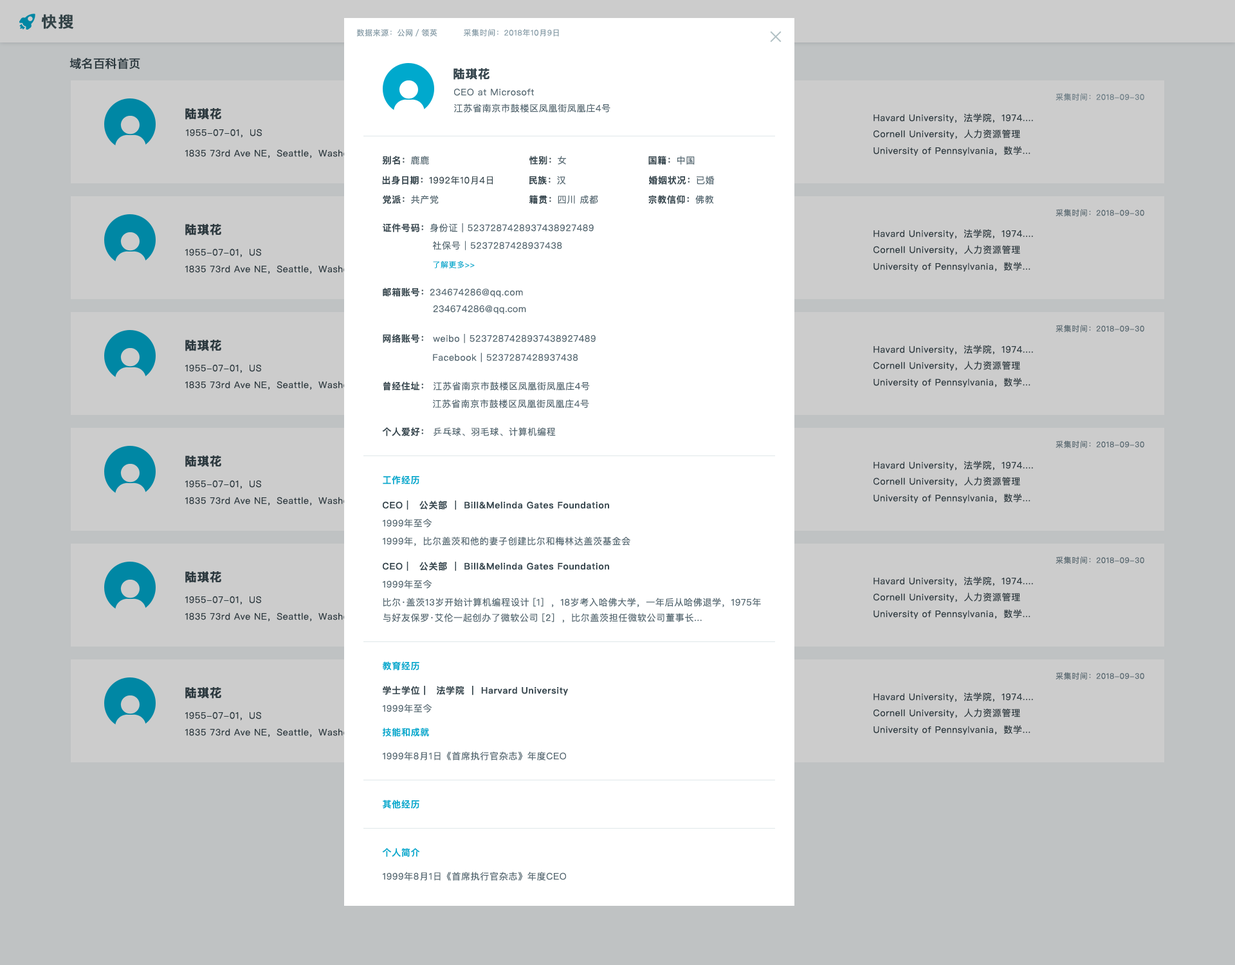
<style>
.page{position:relative;width:1235px;height:965px;background:#cccccc}
.page>*{position:absolute;margin:0}
.t1{font:15.4px "PingFangSC-Semibold";letter-spacing:0.05em;color:#405459;font-weight:bold}
.t2{font:7.7px "PingFangSC-Regular";letter-spacing:0.05em;color:#859ba6}
.t3{font:11.6px "PingFangSC-Regular";color:#37474f;font-weight:bold}
.t4{font:11.6px "PingFangSC-Semibold";letter-spacing:0.05em;color:#37474f;font-weight:bold}
.t5{font:9px "PingFangSC-Regular";letter-spacing:0.05em;color:#536670}
.t6{font:7.7px "PingFangSC-Regular";letter-spacing:0.05em;color:#6a7c85}
.t7{font:9px "PingFangSC-Regular";letter-spacing:0.05em;color:#37474f}
.t8{font:9px "PingFangSC-Semibold";letter-spacing:0.05em;color:#37474f}
.t9{font:7.7px "PingFangSC-Regular";letter-spacing:0.05em;color:#55666e}
.t10{font:7.7px "PingFangSC-Regular";letter-spacing:0.05em;color:#00a9cd}
.t11{font:9px "PingFangSC-Semibold";letter-spacing:0.05em;color:#00a9cd}
.t12{font:9px/15.4px "PingFangSC-Regular";letter-spacing:0.05em;color:#536670}
</style>
<div class="page">
<p class="t1" style="left:41px;top:14px;width:32px;height:15px">快搜</p>
<p class="t2" style="left:356px;top:29px;width:82px;height:8px">数据来源：公网／领英</p>
<p class="t2" style="left:464px;top:29px;width:95px;height:8px">采集时间：2018年10月9日</p>
<p class="t3" style="left:69px;top:58px;width:71px;height:11px">域名百科首页</p>
<p class="t4" style="left:454px;top:68px;width:36px;height:12px">陆琪花</p>
<p class="t5" style="left:454px;top:88px;width:80px;height:8px">CEO at Microsoft</p>
<p class="t6" style="left:1056px;top:93px;width:89px;height:8px">采集时间：2018-09-30</p>
<p class="t4" style="left:185px;top:108px;width:36px;height:12px">陆琪花</p>
<p class="t5" style="left:454px;top:104px;width:157px;height:9px">江苏省南京市鼓楼区凤凰街凤凰庄4号</p>
<p class="t7" style="left:874px;top:113px;width:159px;height:10px">Havard University，法学院，1974....</p>
<p class="t7" style="left:186px;top:129px;width:77px;height:9px">1955-07-01，US</p>
<p class="t7" style="left:874px;top:129px;width:147px;height:10px">Cornell University，人力资源管理</p>
<p class="t7" style="left:185px;top:149px;width:184px;height:9px">1835 73rd Ave NE，Seattle，Washonton</p>
<p class="t7" style="left:874px;top:146px;width:157px;height:10px">University of Pennsylvania，数学...</p>
<p class="t8" style="left:382px;top:156px;width:47px;height:9px">别名：<span class="t5">鹿鹿</span></p>
<p class="t8" style="left:529px;top:156px;width:37px;height:9px">性别：<span class="t5">女</span></p>
<p class="t8" style="left:649px;top:156px;width:46px;height:9px">国籍：<span class="t5">中国</span></p>
<p class="t7" style="left:382px;top:176px;width:111px;height:9px"><span class="t8">出身日期：</span>1992年10月4日</p>
<p class="t8" style="left:529px;top:176px;width:37px;height:9px">民族：<span class="t5">汉</span></p>
<p class="t8" style="left:649px;top:176px;width:66px;height:9px">婚姻状况：<span class="t5">已婚</span></p>
<p class="t8" style="left:383px;top:195px;width:56px;height:9px">党派：<span class="t5">共产党</span></p>
<p class="t5" style="left:529px;top:195px;width:69px;height:9px"><span class="t8">籍贯：</span>四川 成都</p>
<p class="t8" style="left:649px;top:195px;width:65px;height:9px">宗教信仰：<span class="t5">佛教</span></p>
<p class="t9" style="left:1056px;top:209px;width:89px;height:8px">采集时间：2018-09-30</p>
<p class="t4" style="left:185px;top:224px;width:36px;height:12px">陆琪花</p>
<p class="t5" style="left:383px;top:223px;width:211px;height:10px"><span class="t8">证件号码：</span>身份证｜5237287428937438927489</p>
<p class="t7" style="left:874px;top:229px;width:159px;height:10px">Havard University，法学院，1974....</p>
<p class="t5" style="left:432px;top:241px;width:130px;height:9px">社保号｜5237287428937438</p>
<p class="t7" style="left:874px;top:245px;width:147px;height:10px">Cornell University，人力资源管理</p>
<p class="t7" style="left:185px;top:248px;width:77px;height:9px">1955-07-01，US</p>
<p class="t7" style="left:185px;top:265px;width:184px;height:9px">1835 73rd Ave NE，Seattle，Washonton</p>
<p class="t10" style="left:433px;top:261px;width:42px;height:7px">了解更多&gt;&gt;</p>
<p class="t7" style="left:874px;top:262px;width:157px;height:10px">University of Pennsylvania，数学...</p>
<p class="t5" style="left:383px;top:288px;width:140px;height:9px"><span class="t8">邮箱账号：</span>234674286@qq.com</p>
<p class="t5" style="left:433px;top:305px;width:93px;height:9px">234674286@qq.com</p>
<p class="t9" style="left:1056px;top:325px;width:89px;height:8px">采集时间：2018-09-30</p>
<p class="t4" style="left:185px;top:340px;width:36px;height:11px">陆琪花</p>
<p class="t5" style="left:383px;top:334px;width:213px;height:10px"><span class="t8">网络账号： </span>weibo｜5237287428937438927489</p>
<p class="t5" style="left:433px;top:353px;width:145px;height:9px">Facebook｜5237287428937438</p>
<p class="t7" style="left:874px;top:345px;width:159px;height:10px">Havard University，法学院，1974....</p>
<p class="t7" style="left:185px;top:364px;width:77px;height:9px">1955-07-01，US</p>
<p class="t7" style="left:874px;top:361px;width:147px;height:10px">Cornell University，人力资源管理</p>
<p class="t7" style="left:874px;top:378px;width:157px;height:9px">University of Pennsylvania，数学...</p>
<p class="t7" style="left:185px;top:381px;width:184px;height:9px">1835 73rd Ave NE，Seattle，Washonton</p>
<p class="t5" style="left:384px;top:382px;width:206px;height:9px"><span class="t8">曾经住址： </span>江苏省南京市鼓楼区凤凰街凤凰庄4号</p>
<p class="t5" style="left:433px;top:400px;width:156px;height:9px">江苏省南京市鼓楼区凤凰街凤凰庄4号</p>
<p class="t5" style="left:382px;top:427px;width:174px;height:9px"><span class="t8">个人爱好： </span>乒乓球、羽毛球、计算机编程</p>
<p class="t9" style="left:1056px;top:441px;width:89px;height:7px">采集时间：2018-09-30</p>
<p class="t4" style="left:185px;top:456px;width:36px;height:11px">陆琪花</p>
<p class="t7" style="left:874px;top:461px;width:159px;height:9px">Havard University，法学院，1974....</p>
<p class="t7" style="left:185px;top:480px;width:77px;height:9px">1955-07-01，US</p>
<p class="t11" style="left:383px;top:476px;width:37px;height:9px">工作经历</p>
<p class="t7" style="left:874px;top:477px;width:147px;height:9px">Cornell University，人力资源管理</p>
<p class="t7" style="left:185px;top:497px;width:184px;height:9px">1835 73rd Ave NE，Seattle，Washonton</p>
<p class="t7" style="left:874px;top:494px;width:157px;height:9px">University of Pennsylvania，数学...</p>
<p class="t8" style="left:383px;top:501px;width:226px;height:9px">CEO |   公关部 ｜ Bill&amp;Melinda Gates Foundation</p>
<p class="t5" style="left:383px;top:519px;width:49px;height:9px">1999年至今</p>
<p class="t5" style="left:383px;top:537px;width:248px;height:9px">1999年，比尔盖茨和他的妻子创建比尔和梅林达盖茨基金会</p>
<p class="t9" style="left:1056px;top:557px;width:89px;height:7px">采集时间：2018-09-30</p>
<p class="t8" style="left:383px;top:562px;width:226px;height:9px">CEO |   公关部 ｜ Bill&amp;Melinda Gates Foundation</p>
<p class="t4" style="left:185px;top:571px;width:36px;height:12px">陆琪花</p>
<p class="t5" style="left:383px;top:580px;width:49px;height:9px">1999年至今</p>
<p class="t7" style="left:874px;top:577px;width:159px;height:9px">Havard University，法学院，1974....</p>
<p class="t7" style="left:874px;top:593px;width:147px;height:9px">Cornell University，人力资源管理</p>
<p class="t7" style="left:185px;top:596px;width:77px;height:9px">1955-07-01，US</p>
<p class="t12" style="left:383px;top:598px;width:378px;height:25px">比尔·盖茨13岁开始计算机编程设计 [1]  ，18岁考入哈佛大学，一年后从哈佛退学，1975年<br>与好友保罗·艾伦一起创办了微软公司 [2]  ，比尔盖茨担任微软公司董事长...</p>
<p class="t7" style="left:185px;top:613px;width:184px;height:9px">1835 73rd Ave NE，Seattle，Washonton</p>
<p class="t7" style="left:874px;top:609px;width:157px;height:10px">University of Pennsylvania，数学...</p>
<p class="t11" style="left:382px;top:661px;width:38px;height:9px">教育经历</p>
<p class="t9" style="left:1056px;top:672px;width:89px;height:8px">采集时间：2018-09-30</p>
<p class="t4" style="left:185px;top:687px;width:36px;height:12px">陆琪花</p>
<p class="t8" style="left:383px;top:686px;width:185px;height:10px">学士学位 |   法学院 ｜ Harvard University</p>
<p class="t7" style="left:874px;top:692px;width:159px;height:10px">Havard University，法学院，1974....</p>
<p class="t7" style="left:185px;top:712px;width:77px;height:9px">1955-07-01，US</p>
<p class="t5" style="left:383px;top:704px;width:49px;height:9px">1999年至今</p>
<p class="t7" style="left:874px;top:708px;width:147px;height:10px">Cornell University，人力资源管理</p>
<p class="t7" style="left:874px;top:725px;width:157px;height:10px">University of Pennsylvania，数学...</p>
<p class="t7" style="left:185px;top:728px;width:184px;height:9px">1835 73rd Ave NE，Seattle，Washonton</p>
<p class="t11" style="left:382px;top:728px;width:47px;height:9px">技能和成就</p>
<p class="t5" style="left:383px;top:752px;width:183px;height:9px">1999年8月1日《首席执行官杂志》年度CEO</p>
<p class="t11" style="left:383px;top:800px;width:37px;height:9px">其他经历</p>
<p class="t11" style="left:382px;top:848px;width:38px;height:9px">个人简介</p>
<p class="t5" style="left:383px;top:872px;width:183px;height:9px">1999年8月1日《首席执行官杂志》年度CEO</p>
</div>
